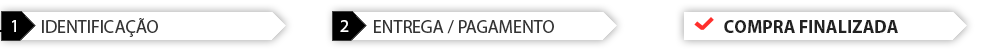
<style>
.page{position:relative;width:996px;height:52px;background:#ffffff}
.page>*{position:absolute;margin:0}
.t1{font:18px "MyriadPro-Regular";color:#ffffff}
.t2{font:18px "MyriadPro-Regular";color:#353535}
.t3{font:18px "MyriadPro-Bold";color:#222222}
</style>
<div class="page">
<p class="t1" style="left:12px;top:20px;width:4px;height:12px">1</p>
<p class="t2" style="left:42px;top:18px;width:116px;height:19px">IDENTIFICAÇÃO</p>
<p class="t1" style="left:340px;top:20px;width:9px;height:12px">2</p>
<p class="t2" style="left:374px;top:20px;width:180px;height:14px">ENTREGA / PAGAMENTO</p>
<p class="t3" style="left:724px;top:20px;width:174px;height:13px">COMPRA FINALIZADA</p>
</div>
